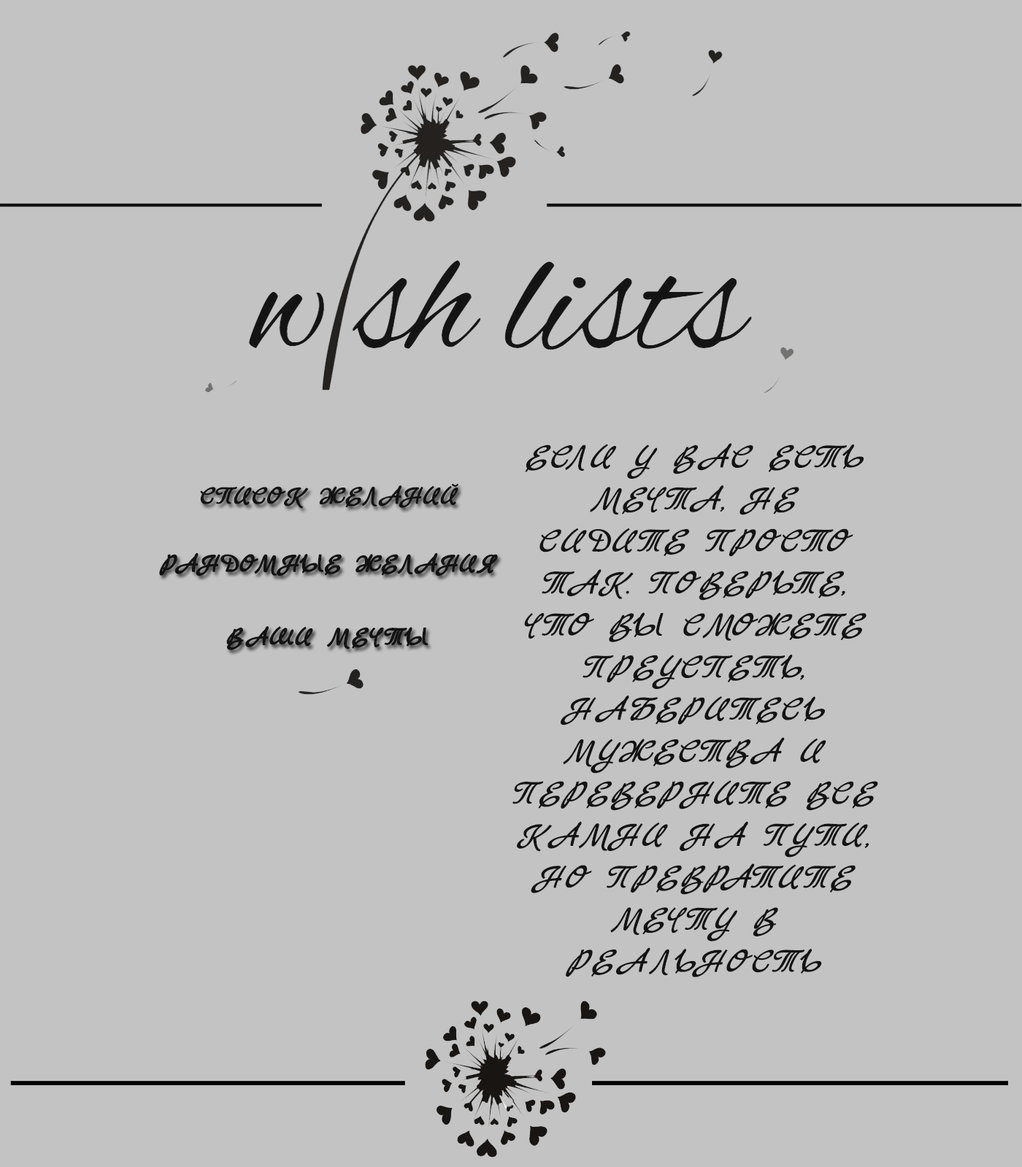
<style>
.page{position:relative;width:1022px;height:1167px;background:#c3c3c3}
.page>*{position:absolute;margin:0}
.t1{font:35px "MarckScript-Regular";color:#000000;text-transform:uppercase;font-style:italic}
.t2{font:26.3px "MarckScript-Regular";color:#000000;text-transform:uppercase;font-weight:bold}
</style>
<div class="page">
<p class="t1" style="left:512px;top:443px;width:366px;height:534px;text-align:center">Если у вас есть мечта, не сидите просто так. Поверьте, что вы сможете преуспеть, наберитесь мужества и переверните все камни на пути, но превратите мечту в реальность</p>
<p class="t2" style="left:200px;top:484px;width:258px;height:24px">Список желаний</p>
<p class="t2" style="left:159px;top:552px;width:339px;height:24px">Рандомные желания</p>
<p class="t2" style="left:226px;top:625px;width:202px;height:25px">ваши мечты</p>
</div>
